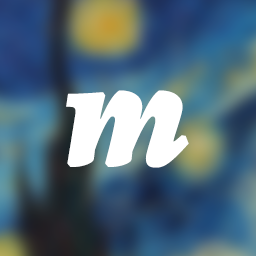
<style>
.page{position:relative;width:256px;height:256px}
.page>*{position:absolute;margin:0}
.t1{font:155.8px "Alegreya-BlackItalic";color:#ffffff}
</style>
<div class="page">
<p class="t1" style="left:66px;top:90px;width:123px;height:78px">m</p>
</div>
